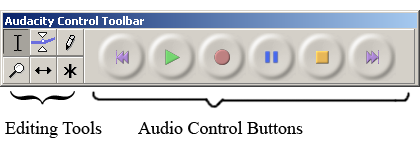
<style>
.page{position:relative;width:420px;height:157px;background:#ffffff}
.page>*{position:absolute;margin:0}
.t1{font:71.5px "TimesNewRomanPSMT";color:#000000;scale:0.67 1}
.t2{font:18px "TimesNewRomanPSMT";color:#000000}
</style>
<div class="page">
<p class="t1" style="left:10px;top:91px;width:65px;height:14px;rotate:-90deg">{</p>
<p class="t2" style="left:5px;top:121px;width:97px;height:17px">Editing Tools</p>
<p class="t2" style="left:138px;top:121px;width:165px;height:13px">Audio Control Buttons</p>
</div>
